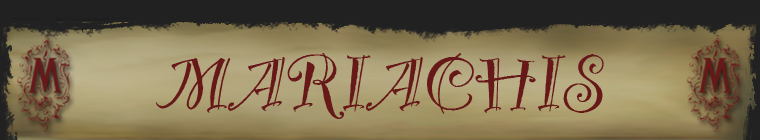
<style>
.page{position:relative;width:760px;height:140px}
.page>*{position:absolute;margin:0}
.t1{font:80px "PartyLetPlain";color:#671818}
</style>
<div class="page">
<p class="t1" style="left:156px;top:53px;width:448px;height:66px">MARIACHIS</p>
</div>
